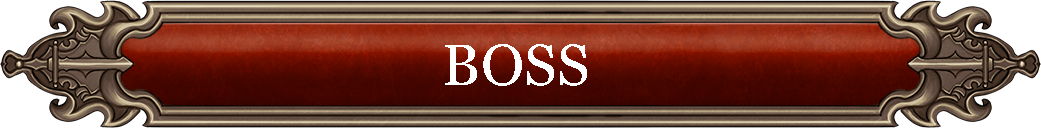
<style>
.page{position:relative;width:1041px;height:128px}
.page>*{position:absolute;margin:0}
.t1{font:58.4px "Georgia";color:#ffffff}
</style>
<div class="page">
<p class="t1" style="left:445px;top:44px;width:142px;height:42px">BOSS</p>
</div>
